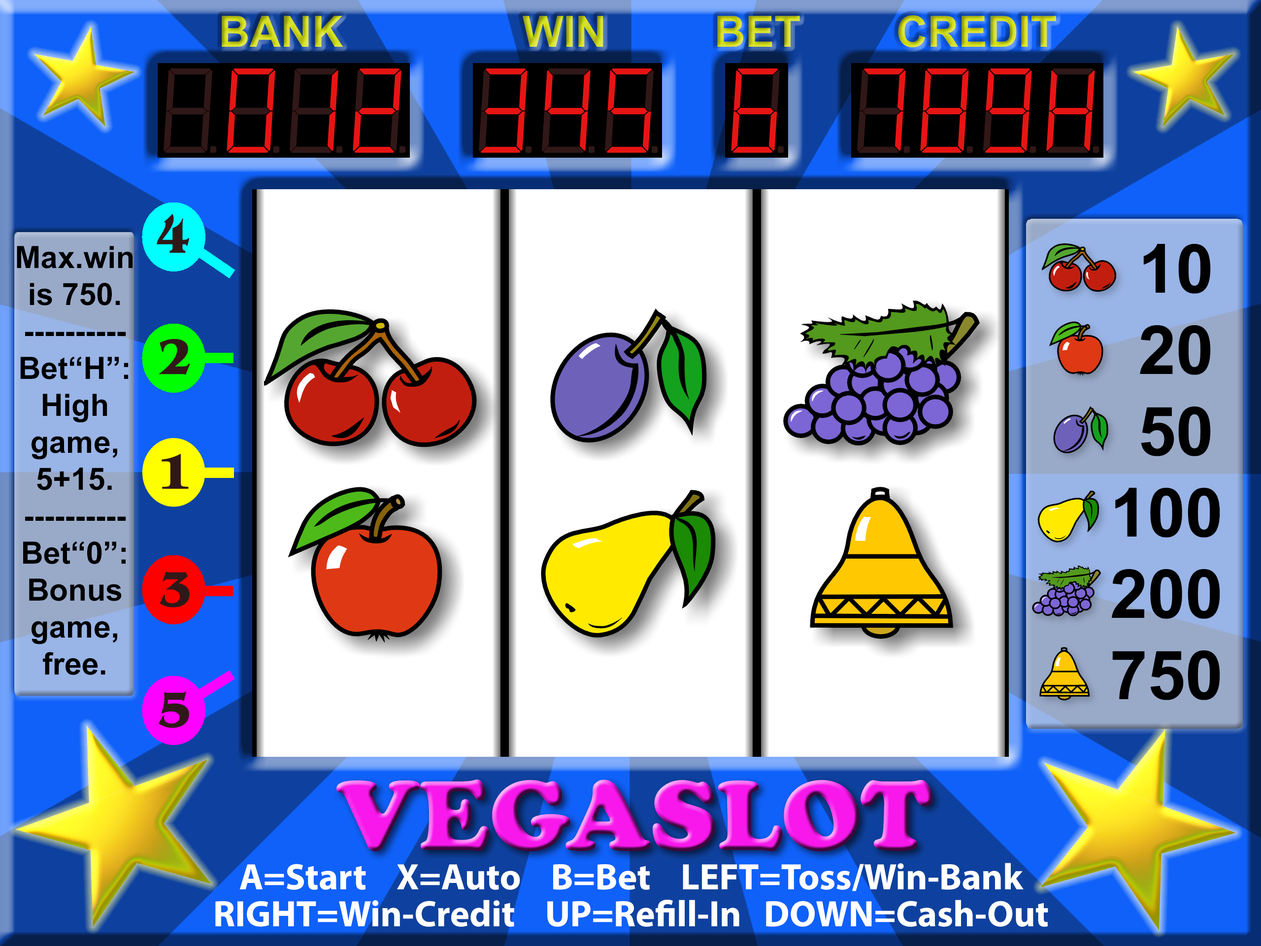
<style>
.page{position:relative;width:1261px;height:946px;background:#ffffff}
.page>*{position:absolute;margin:0}
.t1{font:43.1px "Arial-BoldMT"}
.t2{font:30.8px "Arial-BoldMT";color:#000000}
.t3{font:67.7px "Arial-BoldMT";color:#000000}
.t4{font:102.6px "CooperBlack"}
.t5{font:36.9px/36.9px "MyriadPro-Bold";color:#ffffff}
</style>
<div class="page">
<p class="t1" style="left:222px;top:15px;width:834px;height:32px">BANK               WIN         BET        CREDIT</p>
<p class="t2" style="left:17px;top:246px;width:116px;height:429px;text-align:center">Max.win<br>is 750.<br>----------<br>Bet“H”:<br>High<br>game,<br>5+15.<br>----------<br>Bet“0”:<br>Bonus<br>game,<br>free.</p>
<p class="t3" style="left:1111px;top:244px;width:109px;height:456px;text-align:center">10<br> 20<br> 50<br>100<br>200<br>750</p>
<p class="t4" style="left:336px;top:779px;width:597px;height:72px">VEGASLOT</p>
<p class="t5" style="left:215px;top:862px;width:833px;height:64px;text-align:center">A=Start    X=Auto    B=Bet    LEFT=Toss/Win-Bank<br>RIGHT=Win-Credit    UP=Refill-In   DOWN=Cash-Out</p>
</div>
